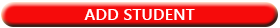
<style>
.page{position:relative;width:280px;height:28px;background:#f60b0b}
.page>*{position:absolute;margin:0}
.t1{font:16.4px "YuGothicUI-Bold";color:#ffffff}
</style>
<div class="page">
<p class="t1" style="left:84px;top:9px;width:111px;height:11px">ADD STUDENT</p>
</div>
